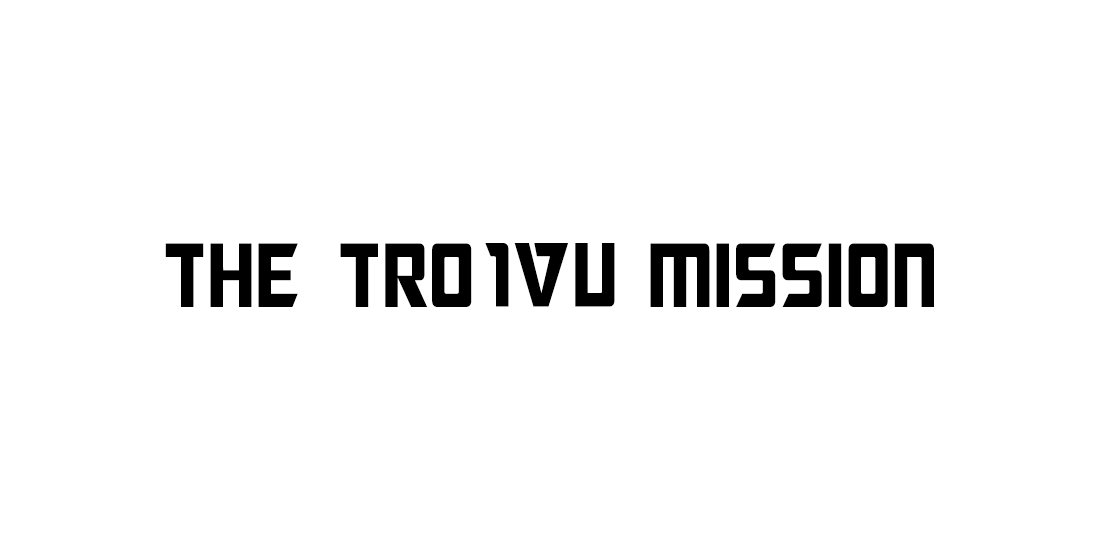
<style>
.page{position:relative;width:1100px;height:550px;background:#ffffff}
.page>*{position:absolute;margin:0}
.t1{font:91.3px "MegatronCondensed";color:#000000}
.t2{font:91.3px "MegatronCondensed";color:#ffffff}
</style>
<div class="page">
<p class="t1" style="left:165px;top:243px;width:769px;height:64px">the tro<span class="t2">jan</span> mission</p>
<p class="t1" style="left:485px;top:243px;width:130px;height:64px">jan</p>
</div>
